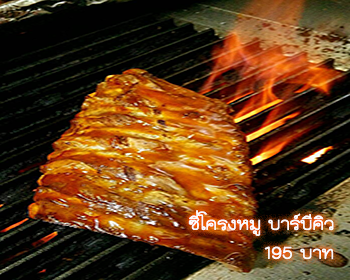
<style>
.page{position:relative;width:350px;height:280px}
.page>*{position:absolute;margin:0}
.t1{font:24px "THKodchasal";color:#ffffff}
</style>
<div class="page">
<p class="t1" style="left:188px;top:210px;width:146px;height:50px">ซี่โครงหมู บาร์บีคิว<br>บาท 195</p>
</div>
